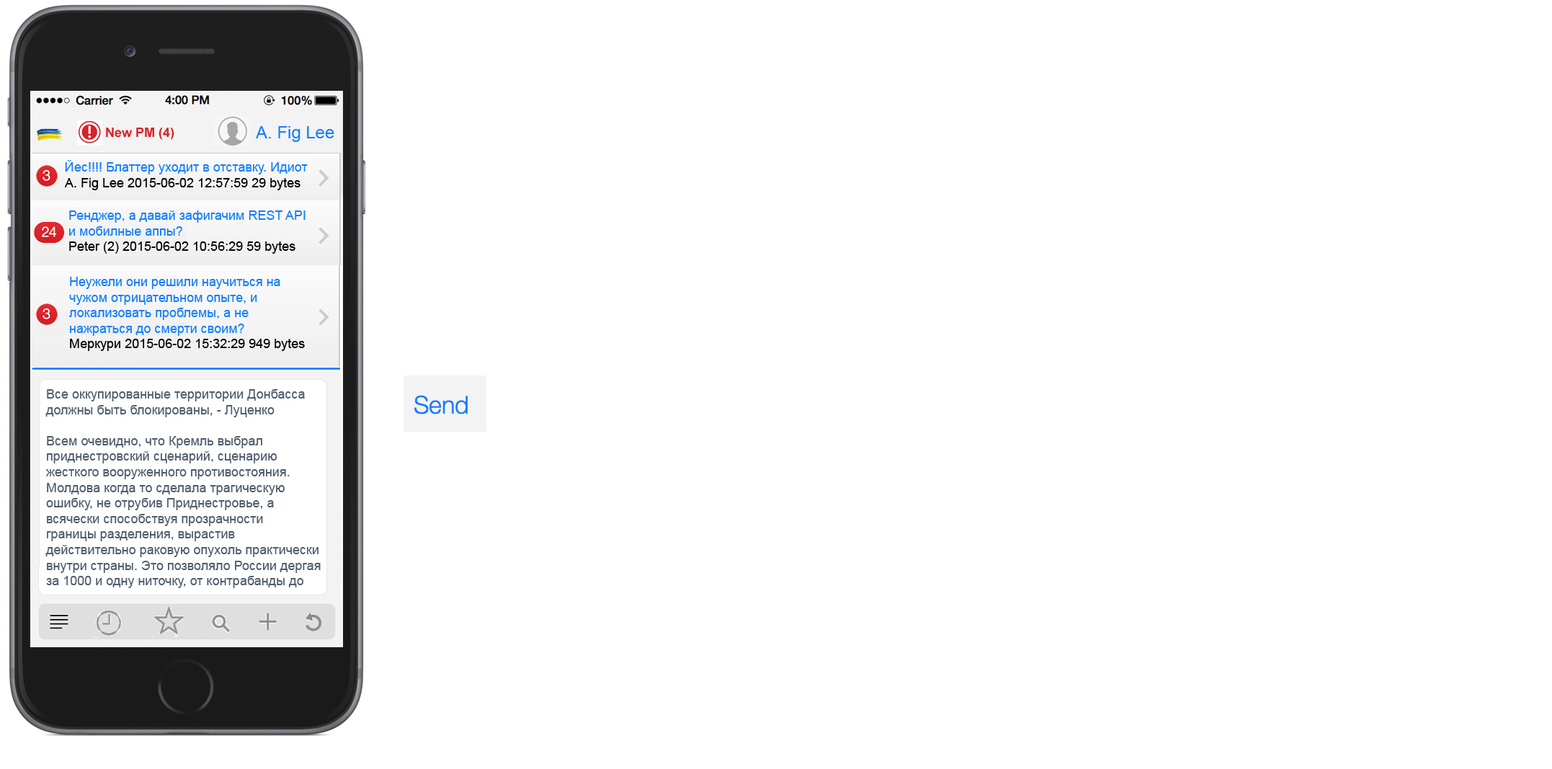
<style>
.page{position:relative;width:1552px;height:769px;background:#ffffff}
.page>*{position:absolute;margin:0}
.t1{font:13px "Arial-BoldMT";color:#db2329}
.t2{font:13px "ArialMT";color:#157efb}
.t3{font:13px "ArialMT";color:#000000}
.t4{font:13px "ArialMT";color:#010101}
.t5{font:13px "ArialMT";color:#4f5d6e}
</style>
<div class="page">
<p class="t1" style="left:106px;top:127px;width:68px;height:13px">New PM (4)</p>
<p class="t2" style="left:64px;top:160px;width:244px;height:30px">Йес!!!! Блаттер уходит в отставку. Идиот<br><span class="t3">A. Fig Lee 2015-06-02 12:57:59 29 bytes</span></p>
<p class="t2" style="left:69px;top:210px;width:236px;height:44px">Ренджер, а давай зафигачим REST API <br>и мобилные аппы? <br><span class="t4">Peter (2) 2015-06-02 10:56:29 59 bytes</span></p>
<p class="t2" style="left:69px;top:277px;width:236px;height:74px">Неужели они решили научиться на <br>чужом отрицательном опыте, и <br>локализовать проблемы, а не <br>нажраться до смерти своим?<br><span class="t3">Меркури 2015-06-02 15:32:29 949 bytes</span></p>
<p class="t5" style="left:45px;top:389px;width:276px;height:199px">Все оккупированные территории Донбасса <br>должны быть блокированы, - Луценко<br><br>Всем очевидно, что Кремль выбрал <br>приднестровский сценарий, сценарию <br>жесткого вооруженного противостояния. <br>Молдова когда то сделала трагическую <br>ошибку, не отрубив Приднестровье, а <br>всячески способствуя прозрачности <br>границы разделения, вырастив <br>действительно раковую опухоль практически <br>внутри страны. Это позволяло России дергая <br>за 1000 и одну ниточку, от контрабанды до</p>
</div>
